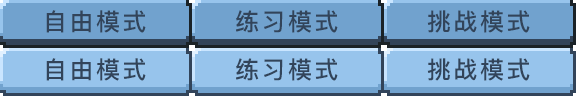
<style>
.page{position:relative;width:576px;height:96px;background:#71a2ce}
.page>*{position:absolute;margin:0}
.t1{font:24px "PingFang-SC-Bold";letter-spacing:0.1em;color:#32445a}
</style>
<div class="page">
<p class="t1" style="left:46px;top:10px;width:100px;height:23px">自由模式</p>
<p class="t1" style="left:236px;top:10px;width:102px;height:23px">练习模式</p>
<p class="t1" style="left:427px;top:10px;width:103px;height:23px">挑战模式</p>
<p class="t1" style="left:46px;top:58px;width:100px;height:23px">自由模式</p>
<p class="t1" style="left:236px;top:58px;width:102px;height:23px">练习模式</p>
<p class="t1" style="left:427px;top:58px;width:103px;height:23px">挑战模式</p>
</div>
